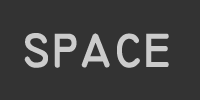
<style>
.page{position:relative;width:200px;height:100px;background:#333333}
.page>*{position:absolute;margin:0}
.t1{font:60px "TechnicBold";color:#cccccc}
</style>
<div class="page">
<p class="t1" style="left:24px;top:33px;width:145px;height:35px">space</p>
</div>
